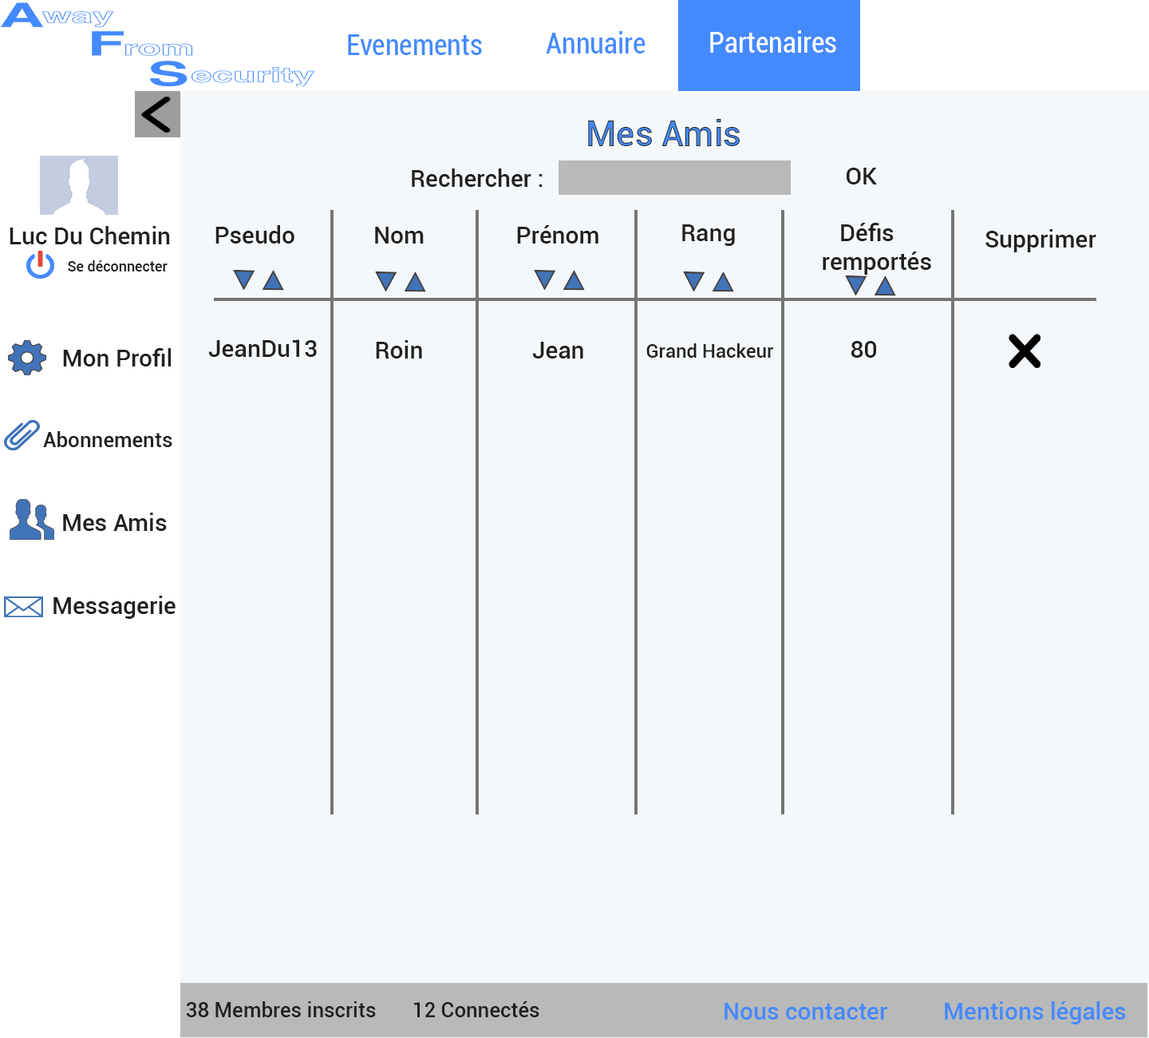
<style>
.page{position:relative;width:1149px;height:1038px;background:#f5f8fa}
.page>*{position:absolute;margin:0}
.t1{font:28.7px "Roboto-Condensed";color:#448aff}
.t2{font:28.7px "Roboto-Condensed";color:#ffffff}
.t3{font:35.1px "Roboto-Medium"}
.t4{font:23.9px "Roboto-Medium";color:#212121}
.t5{font:14.4px "Roboto-Medium";color:#212121}
.t6{font:19.2px "Roboto-Medium";color:#212121}
.t7{font:20.8px "Roboto-Medium";color:#212121}
.t8{font:23.9px "Roboto-Medium";color:#448aff}
</style>
<div class="page">
<p class="t1" style="left:348px;top:34px;width:134px;height:21px">Evenements</p>
<p class="t1" style="left:546px;top:31px;width:100px;height:22px">Annuaire</p>
<p class="t2" style="left:710px;top:30px;width:126px;height:23px">Partenaires</p>
<p class="t3" style="left:588px;top:119px;width:152px;height:27px">Mes Amis</p>
<p class="t4" style="left:412px;top:168px;width:131px;height:19px">Rechercher :</p>
<p class="t4" style="left:847px;top:168px;width:30px;height:16px">OK</p>
<p class="t4" style="left:10px;top:226px;width:160px;height:18px">Luc Du Chemin</p>
<p class="t4" style="left:215px;top:225px;width:80px;height:18px">Pseudo</p>
<p class="t4" style="left:375px;top:227px;width:49px;height:16px">Nom</p>
<p class="t4" style="left:517px;top:225px;width:82px;height:18px">Prénom</p>
<p class="t4" style="left:682px;top:224px;width:53px;height:22px">Rang</p>
<p class="t4" style="left:823px;top:223px;width:108px;height:52px">Défis <br>remportés</p>
<p class="t4" style="left:986px;top:229px;width:111px;height:23px">Supprimer</p>
<p class="t5" style="left:68px;top:260px;width:100px;height:11px">Se déconnecter</p>
<p class="t4" style="left:208px;top:339px;width:109px;height:18px">JeanDu13</p>
<p class="t4" style="left:376px;top:340px;width:46px;height:18px">Roin</p>
<p class="t4" style="left:532px;top:342px;width:51px;height:16px">Jean</p>
<p class="t4" style="left:851px;top:341px;width:25px;height:17px">80</p>
<p class="t4" style="left:63px;top:348px;width:109px;height:18px">Mon Profil</p>
<p class="t6" style="left:646px;top:343px;width:128px;height:15px">Grand Hackeur</p>
<p class="t7" style="left:43px;top:431px;width:129px;height:16px">Abonnements</p>
<p class="t4" style="left:63px;top:512px;width:104px;height:19px">Mes Amis</p>
<p class="t4" style="left:53px;top:595px;width:123px;height:24px">Messagerie</p>
<p class="t7" style="left:186px;top:1001px;width:354px;height:16px">38 Membres inscrits       12 Connectés</p>
<p class="t8" style="left:945px;top:1001px;width:181px;height:23px">Mentions légales</p>
<p class="t8" style="left:725px;top:1002px;width:163px;height:17px">Nous contacter</p>
</div>
